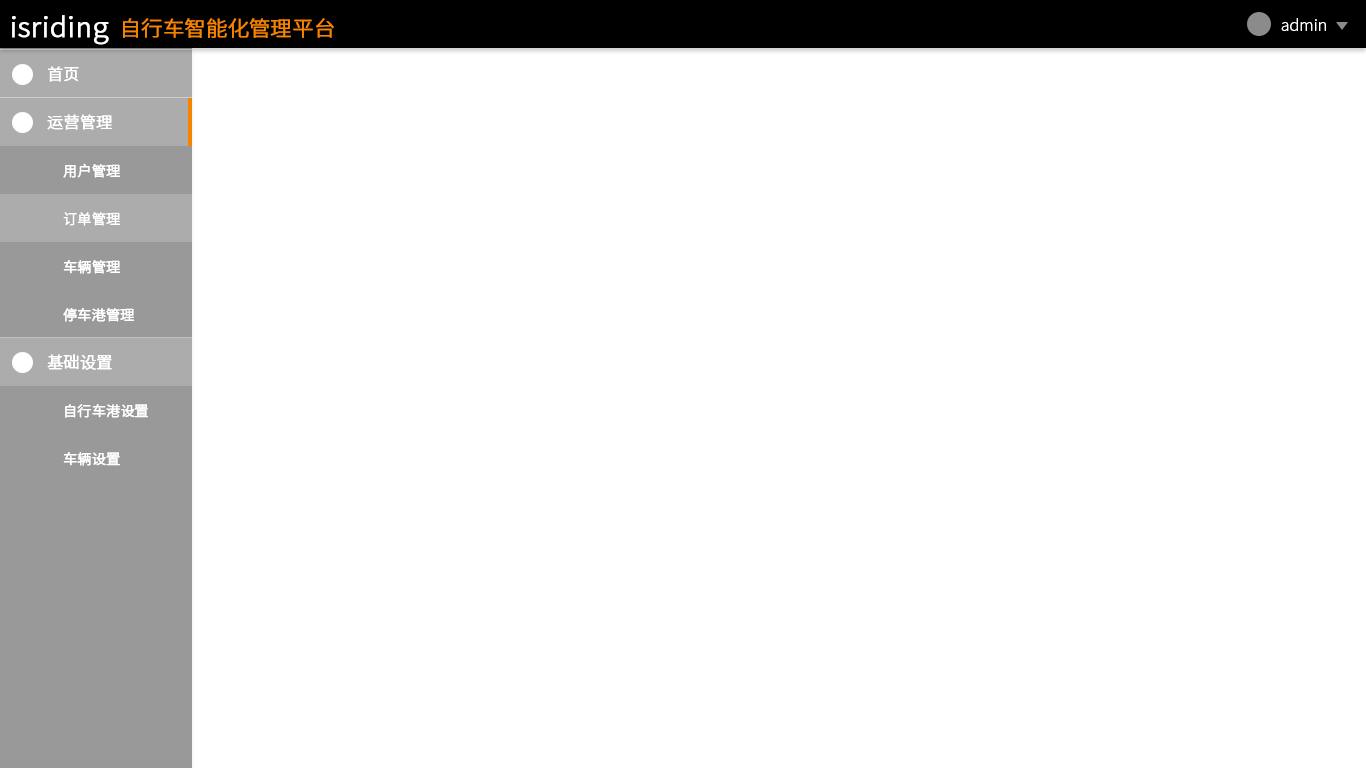
<style>
.page{position:relative;width:1366px;height:768px;background:#ffffff}
.page>*{position:absolute;margin:0}
.t1{font:28px "SourceHanSansCN-Light";color:#fefefe;font-weight:bold}
.t2{font:21px "SourceHanSansCN-Light";color:#f58400;font-weight:bold}
.t3{font:16px "SourceHanSansCN-Light";color:#ffffff}
.t4{font:16px "SourceHanSansCN-Light";color:#ffffff;font-weight:bold}
.t5{font:14px "SourceHanSansCN-Light";color:#ffffff;font-weight:bold}
</style>
<div class="page">
<p class="t1" style="left:12px;top:15px;width:97px;height:30px">isriding</p>
<p class="t2" style="left:123px;top:18px;width:211px;height:20px">自行车智能化管理平台</p>
<p class="t3" style="left:1281px;top:18px;width:45px;height:13px">admin</p>
<p class="t4" style="left:47px;top:66px;width:32px;height:16px">首页</p>
<p class="t4" style="left:47px;top:114px;width:65px;height:16px">运营管理</p>
<p class="t5" style="left:63px;top:163px;width:57px;height:15px">用户管理</p>
<p class="t5" style="left:63px;top:212px;width:57px;height:14px">订单管理</p>
<p class="t5" style="left:63px;top:260px;width:57px;height:14px">车辆管理</p>
<p class="t5" style="left:63px;top:308px;width:71px;height:14px">停车港管理</p>
<p class="t4" style="left:47px;top:354px;width:65px;height:16px">基础设置</p>
<p class="t5" style="left:65px;top:404px;width:83px;height:14px">自行车港设置</p>
<p class="t5" style="left:63px;top:452px;width:57px;height:14px">车辆设置</p>
</div>
